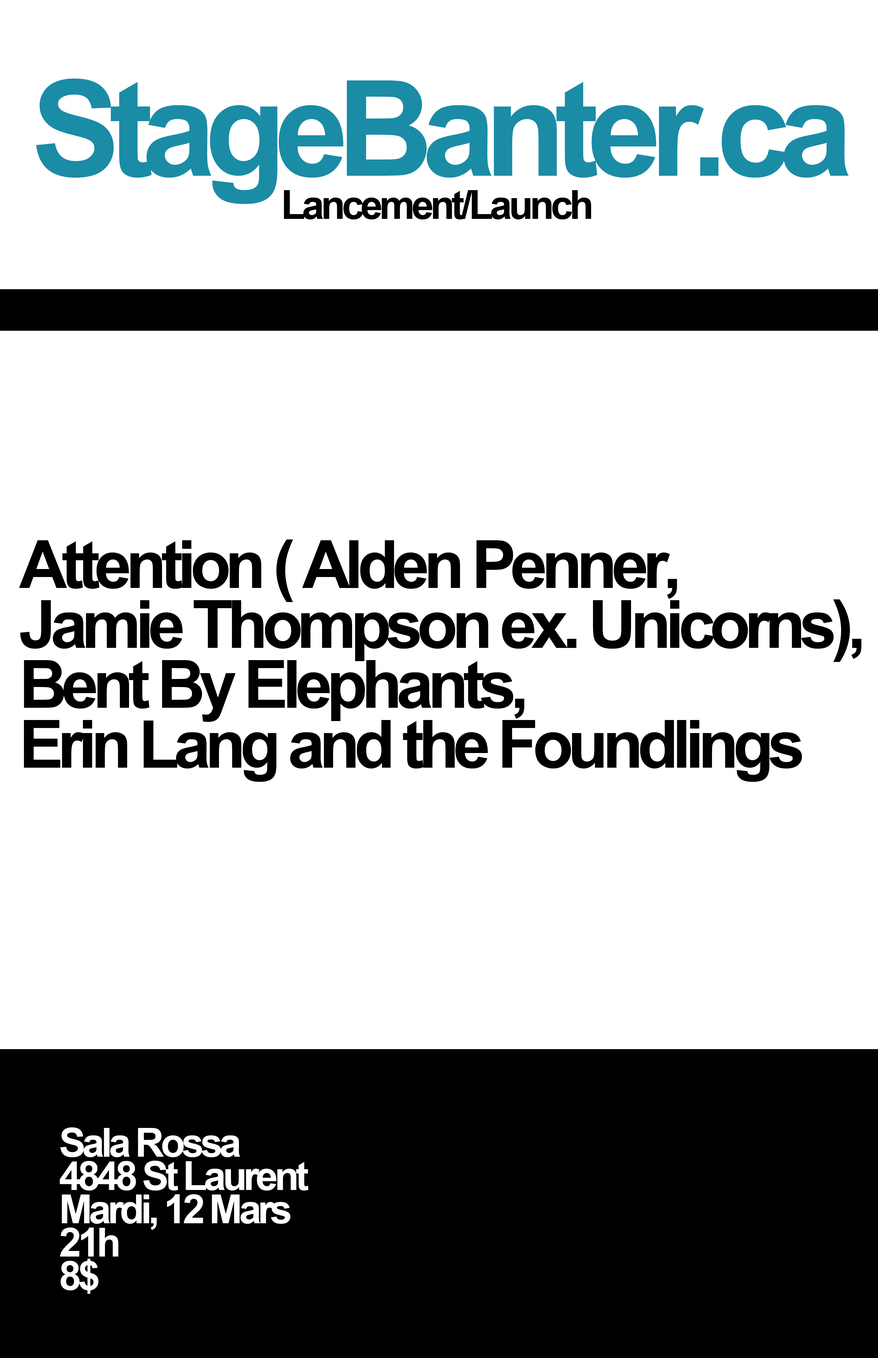
<style>
.page{position:relative;width:878px;height:1358px;background:#ffffff}
.page>*{position:absolute;margin:0}
.t1{font:133.1px "Arial-BoldMT";letter-spacing:-0.085em;color:#1b8ca6}
.t2{font:39.9px "Arial-BoldMT";letter-spacing:-0.085em;color:#000101}
.t3{font:66.5px/59.9px "Arial-BoldMT";letter-spacing:-0.085em;color:#000000}
.t4{font:39.9px/33.3px "Arial-BoldMT";letter-spacing:-0.085em;color:#ffffff}
</style>
<div class="page">
<p class="t1" style="left:36px;top:79px;width:813px;height:125px">StageBanter.ca</p>
<p class="t2" style="left:284px;top:190px;width:307px;height:29px">Lancement/Launch</p>
<p class="t3" style="left:19px;top:539px;width:843px;height:243px">Attention ( Alden Penner, <br>Jamie Thompson ex. Unicorns),<br>Bent By Elephants,<br>Erin Lang and the Foundlings</p>
<p class="t4" style="left:60px;top:1127px;width:249px;height:166px">Sala Rossa<br>4848 St Laurent<br>Mardi, 12 Mars<br>21h<br>8$</p>
</div>
